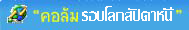
<style>
.page{position:relative;width:189px;height:30px;background:#45a7e4}
.page>*{position:absolute;margin:0}
.t1{font:24px "LilyUPC";color:#fdfcfc}
</style>
<div class="page">
<p class="t1" style="left:82px;top:6px;width:92px;height:15px">รอบโลกสัปดาห์นี้</p>
</div>
